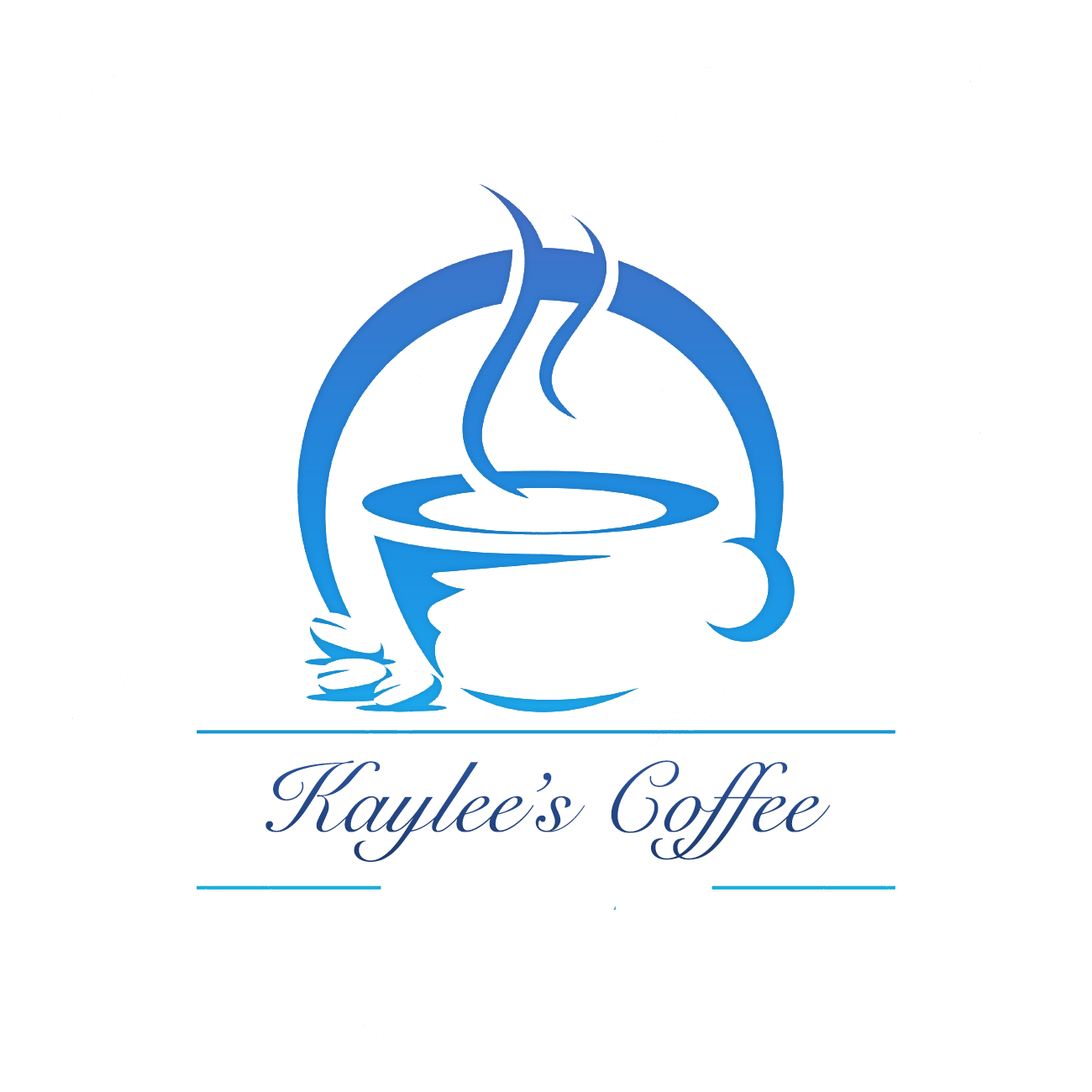
<style>
.page{position:relative;width:1092px;height:1092px;background:#ffffff}
.page>*{position:absolute;margin:0}
.t1{font:99.2px "SnellRoundhand";color:#21537c}
</style>
<div class="page">
<p class="t1" style="left:265px;top:760px;width:566px;height:102px">Kaylee’s Coffee</p>
</div>
